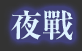
<style>
.page{position:relative;width:82px;height:51px;background:#414179}
.page>*{position:absolute;margin:0}
.t1{font:32px "RyuminPro-ExBold";color:#def2ff}
</style>
<div class="page">
<p class="t1" style="left:11px;top:10px;width:62px;height:30px">夜戰</p>
</div>
